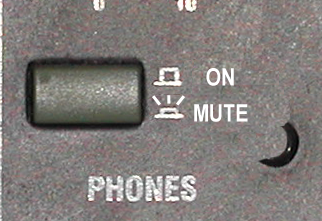
<style>
.page{position:relative;width:322px;height:221px}
.page>*{position:absolute;margin:0}
.t1{font:24px "ArialNarrow-Bold";color:#ffffff}
</style>
<div class="page">
<p class="t1" style="left:206px;top:68px;width:28px;height:18px">ON</p>
<p class="t1" style="left:194px;top:104px;width:54px;height:18px">MUTE</p>
</div>
